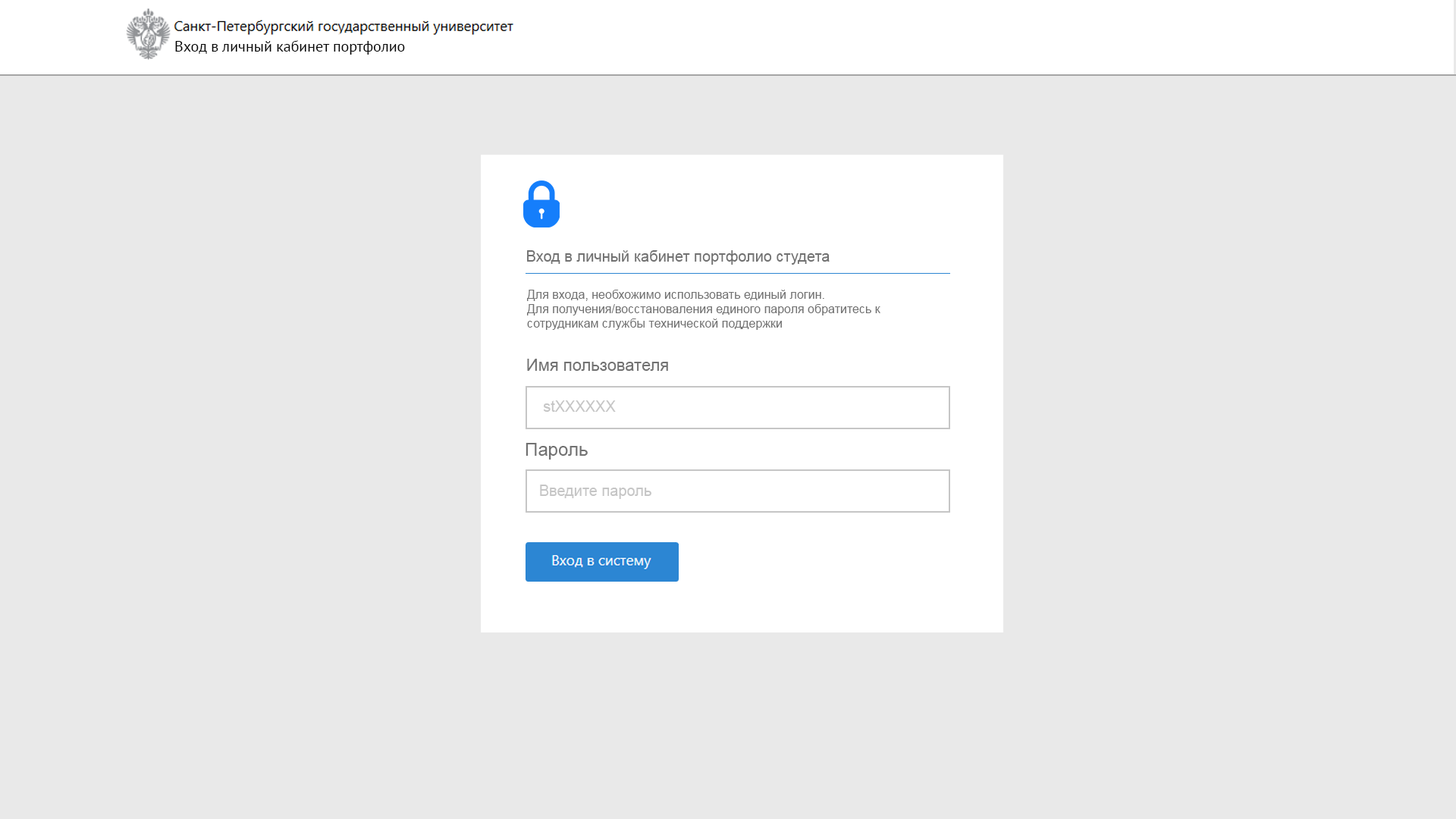
<style>
.page{position:relative;width:1456px;height:819px;background:#e9e9e9}
.page>*{position:absolute;margin:0}
.t1{font:15.2px "PTSans-Regular";color:#060606}
.t2{font:15.2px "ArialMT";color:#727272}
.t3{font:12.1px "ArialMT";color:#727272}
.t4{font:16.7px "ArialMT";color:#727272}
.t5{font:15.2px "ArialMT";color:#c6c6c6}
.t6{font:18.2px "ArialMT";color:#727272}
</style>
<div class="page">
<p class="t1" style="left:175px;top:40px;width:230px;height:15px">Вход в личный кабинет портфолио</p>
<p class="t2" style="left:527px;top:250px;width:303px;height:15px">Вход в личный кабинет портфолио студета</p>
<p class="t3" style="left:527px;top:290px;width:353px;height:40px">Для входа, необхожимо использовать единый логин. <br>Для получения/восстановаления единого пароля обратитесь к <br>сотрудникам службы технической поддержки</p>
<p class="t4" style="left:527px;top:359px;width:141px;height:12px">Имя пользователя</p>
<p class="t5" style="left:543px;top:400px;width:73px;height:12px">stXXXXXX</p>
<p class="t6" style="left:526px;top:443px;width:62px;height:17px">Пароль</p>
<p class="t5" style="left:540px;top:485px;width:111px;height:14px">Введите пароль</p>
</div>
